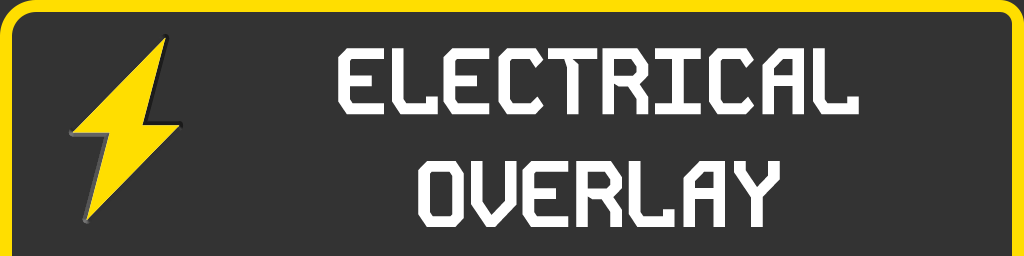
<style>
.page{position:relative;width:1024px;height:256px;background:#333333}
.page>*{position:absolute;margin:0}
.t1{font:94px "KodeMono-Bold";letter-spacing:-0.04em;color:#ffffff;text-transform:uppercase}
</style>
<div class="page">
<p class="t1" style="left:338px;top:48px;width:521px;height:179px;text-align:center">Electrical<br>overlay</p>
</div>
